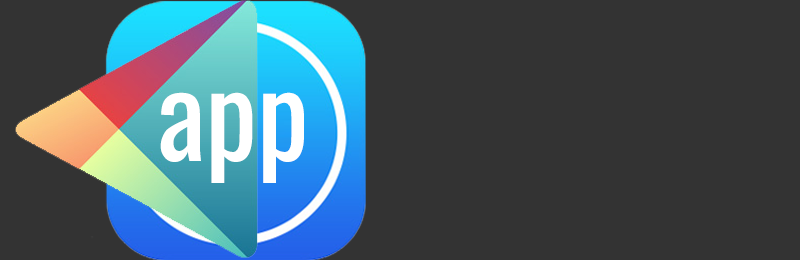
<style>
.page{position:relative;width:800px;height:260px;background:#333333}
.page>*{position:absolute;margin:0}
.t1{font:116px "Oswald-Regular";color:#ffffff}
</style>
<div class="page">
<p class="t1" style="left:160px;top:92px;width:144px;height:91px">app</p>
</div>
